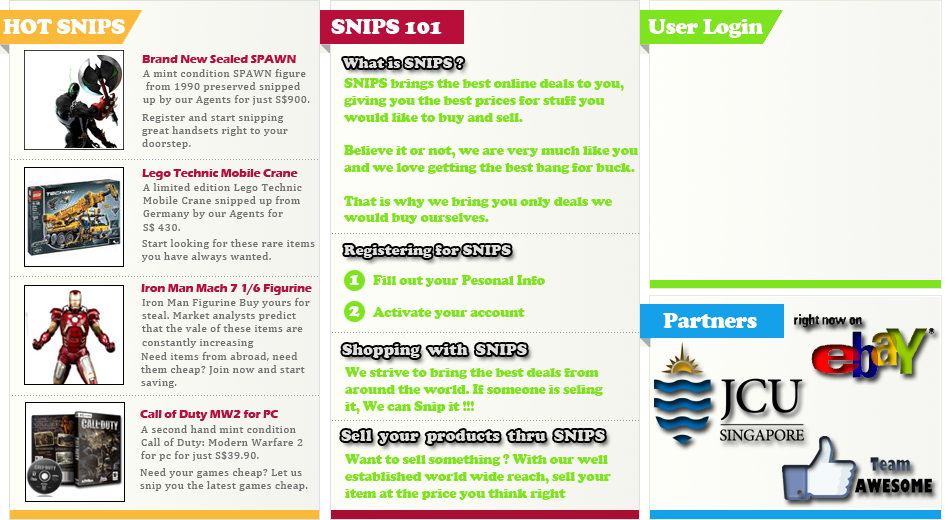
<style>
.page{position:relative;width:945px;height:520px}
.page>*{position:absolute;margin:0}
.t1{font:22px "CooperBlack";letter-spacing:-0.025em;color:#ffffff}
.t2{font:12px "ErasITC-Bold";letter-spacing:-0.025em;color:#b70f39}
.t3{font:15px "CooperBlack";color:#e1e0de}
.t4{font:11px "CambriaMath";letter-spacing:0.05em;color:#727271}
.t5{font:14px "CooperBlack";letter-spacing:-0.025em;color:#7ee41e}
.t6{font:18px "CooperBlack";letter-spacing:-0.025em;color:#ffffff}
.t7{font:16px "CooperBlack";color:#e1e0de}
</style>
<div class="page">
<p class="t1" style="left:3px;top:19px;width:122px;height:15px">HOT SNIPS</p>
<p class="t1" style="left:331px;top:19px;width:111px;height:15px">SNIPS 101</p>
<p class="t1" style="left:648px;top:19px;width:115px;height:19px">User Login</p>
<p class="t2" style="left:142px;top:55px;width:154px;height:8px">Brand New Sealed SPAWN</p>
<p class="t3" style="left:343px;top:58px;width:121px;height:10px">What is SNIPS ?</p>
<p class="t4" style="left:142px;top:69px;width:168px;height:36px">A mint condition SPAWN figure<br> from 1990 preserved snipped <br>up by our Agents for just S$900.</p>
<p class="t5" style="left:343px;top:78px;width:295px;height:146px">SNIPS brings the best online deals to you, <br>giving you the best prices for stuff you <br>would like to buy and sell. <br><br>Believe it or not, we are very much like you <br>and we love getting the best bang for buck. <br><br>That is why we bring you only deals we <br>would buy ourselves.</p>
<p class="t4" style="left:142px;top:113px;width:146px;height:36px">Register and start snipping<br>great handsets right to your<br>doorstep.</p>
<p class="t2" style="left:142px;top:169px;width:156px;height:11px">Lego Technic Mobile Crane</p>
<p class="t4" style="left:142px;top:183px;width:160px;height:49px">A limited edition Lego Technic <br>Mobile Crane snipped up from<br>Germany by our Agents for<br>S$ 430.</p>
<p class="t4" style="left:142px;top:239px;width:173px;height:23px">Start looking for these rare items<br>you have always wanted.</p>
<p class="t3" style="left:344px;top:245px;width:167px;height:13px">Registering for SNIPS</p>
<p class="t6" style="left:349px;top:275px;width:10px;height:10px">1</p>
<p class="t5" style="left:373px;top:275px;width:172px;height:12px">Fill out your Pesonal Info</p>
<p class="t2" style="left:141px;top:284px;width:171px;height:11px">Iron Man Mach 7 1/6 Figurine</p>
<p class="t4" style="left:142px;top:298px;width:168px;height:50px">Iron Man Figurine Buy yours for<br>steal. Market analysts predict<br>that the vale of these items are<br>constantly increasing</p>
<p class="t6" style="left:349px;top:306px;width:11px;height:11px">2</p>
<p class="t5" style="left:373px;top:307px;width:152px;height:12px">Activate your account</p>
<p class="t1" style="left:663px;top:313px;width:94px;height:15px">Partners</p>
<p class="t4" style="left:141px;top:352px;width:164px;height:36px">Need items from abroad, need<br>them cheap? Join now and start<br>saving.</p>
<p class="t7" style="left:342px;top:344px;width:185px;height:14px">Shopping  with  SNIPS</p>
<p class="t5" style="left:345px;top:367px;width:258px;height:47px">We strive to bring the best deals from<br>around the world. If someone is seling<br>it, We can Snip it !!!</p>
<p class="t2" style="left:140px;top:410px;width:138px;height:11px">Call of Duty MW2 for PC</p>
<p class="t4" style="left:140px;top:425px;width:163px;height:36px">A second hand mint condition<br>Call of Duty: Modern Warfare 2<br>for pc for just S$39.90.</p>
<p class="t7" style="left:341px;top:430px;width:264px;height:14px">Sell  your  products  thru  SNIPS</p>
<p class="t5" style="left:345px;top:454px;width:266px;height:46px">Want to sell something ? With our well<br>established world wide reach, sell your<br>item at the price you think right</p>
<p class="t4" style="left:140px;top:468px;width:168px;height:23px">Need your games cheap? Let us<br>snip you the latest games cheap.</p>
</div>
